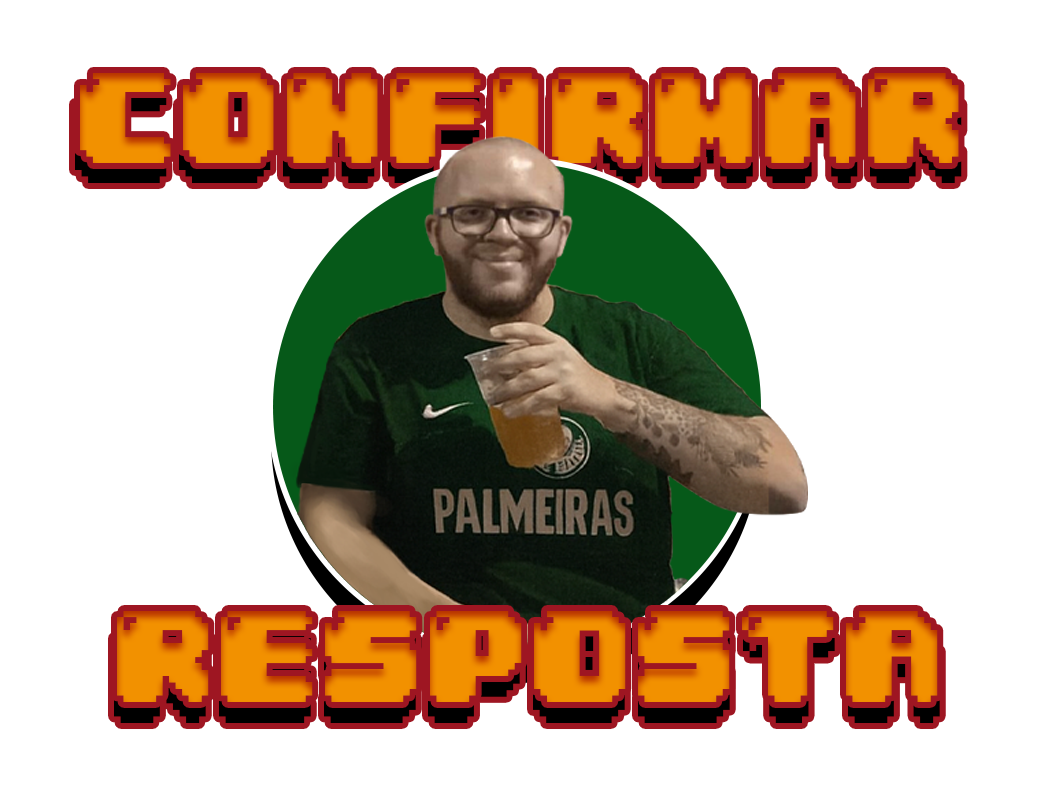
<style>
.page{position:relative;width:1041px;height:787px;background:#ffffff}
.page>*{position:absolute;margin:0}
.t1{font:109.8px "04b30";color:#f29100}
.t2{font:110.9px "04b30"}
.t3{font:110.7px "04b30";color:#f29100}
.t4{font:111.4px "04b30"}
</style>
<div class="page">
<p class="t1" style="left:80px;top:73px;width:879px;height:90px">CONFIRMAR</p>
<p class="t2" style="left:75px;top:92px;width:887px;height:91px">CONFIRMAR</p>
<p class="t3" style="left:117px;top:611px;width:821px;height:91px">RESPOSTA</p>
<p class="t4" style="left:114px;top:631px;width:826px;height:92px">RESPOSTA</p>
</div>
